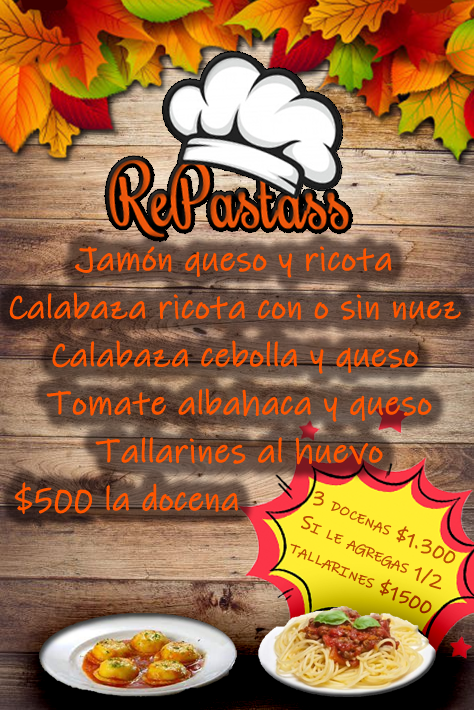
<style>
.page{position:relative;width:474px;height:710px}
.page>*{position:absolute;margin:0}
.t1{font:34px/48px "InkFree";color:#fe5500;font-weight:bold}
</style>
<div class="page">
<p class="t1" style="left:9px;top:246px;width:452px;height:268px;text-align:center">Jamón queso y ricota <br>Calabaza ricota con o sin nuez <br>Calabaza cebolla y queso <br>Tomate albahaca y queso<br>Tallarines al huevo<br>$500 la docena</p>
</div>
